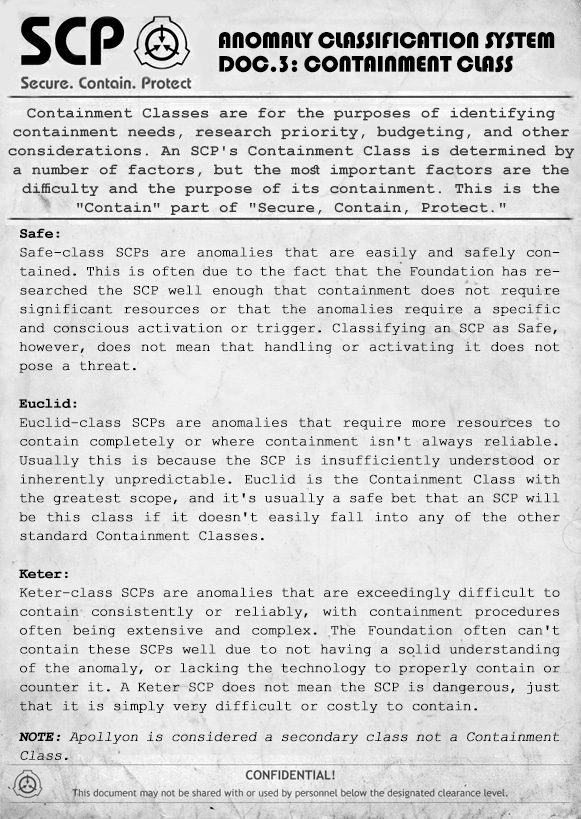
<style>
.page{position:relative;width:581px;height:819px}
.page>*{position:absolute;margin:0}
.t1{font:23.6px/23.6px "Bauhaus93";letter-spacing:-0.025em;color:#000000;text-transform:uppercase}
.t2{font:15.7px "CourierNewPS-BoldMT";letter-spacing:0.01em;color:#343434}
.t3{font:14.2px/18.9px "CourierNewPSMT";letter-spacing:-0.025em;color:#000000;font-weight:bold}
.t4{font:14.2px/18.9px "CourierNewPS-BoldMT";letter-spacing:-0.025em;color:#000000;font-weight:bold}
.t5{font:14.2px/18.9px "CourierNewPSMT";letter-spacing:-0.025em;color:#000000;font-weight:bold;font-style:italic}
.t6{font:14.2px/18.9px "CourierNewPS-BoldMT";letter-spacing:-0.025em;color:#000000;font-weight:bold;font-style:italic}
</style>
<div class="page">
<p class="t1" style="left:219px;top:32px;width:336px;height:41px">Anomaly Classification System<br>Doc.3: Containment Class</p>
<p class="t2" style="left:8px;top:107px;width:567px;height:108px;text-align:center">Containment Classes are for the purposes of identifying containment needs, research priority, budgeting, and other considerations. An SCP's Containment Class is determined by a number of factors, but the most important factors are the difficulty and the purpose of its containment. This is the "Contain" part of "Secure, Contain, Protect."</p>
<p class="t3" style="left:19px;top:228px;width:541px;height:485px;text-align:justify"><span class="t4">Safe:<br></span>Safe-class SCPs are anomalies that are easily and safely contained. This is often due to the fact that the Foundation has researched the SCP well enough that containment does not require significant resources or that the anomalies require a specific and conscious activation or trigger. Classifying an SCP as Safe, however, does not mean that handling or activating it does not pose a threat.<br><br><span class="t4">Euclid:<br></span>Euclid-class SCPs are anomalies that require more resources to contain completely or where containment isn't always reliable. Usually this is because the SCP is insufficiently understood or inherently unpredictable. Euclid is the Containment Class with the greatest scope, and it's usually a safe bet that an SCP will be this class if it doesn't easily fall into any of the other standard Containment Classes.<br><br><span class="t4">Keter:<br></span>Keter-class SCPs are anomalies that are exceedingly difficult to contain consistently or reliably, with containment procedures often being extensive and complex. The Foundation often can't contain these SCPs well due to not having a solid understanding of the anomaly, or lacking the technology to properly contain or counter it. A Keter SCP does not mean the SCP is dangerous, just that it is simply very difficult or costly to contain.</p>
<p class="t5" style="left:19px;top:731px;width:540px;height:29px;text-align:justify"><span class="t6">NOTE:</span> Apollyon is considered a secondary class not a Containment Class.</p>
</div>
